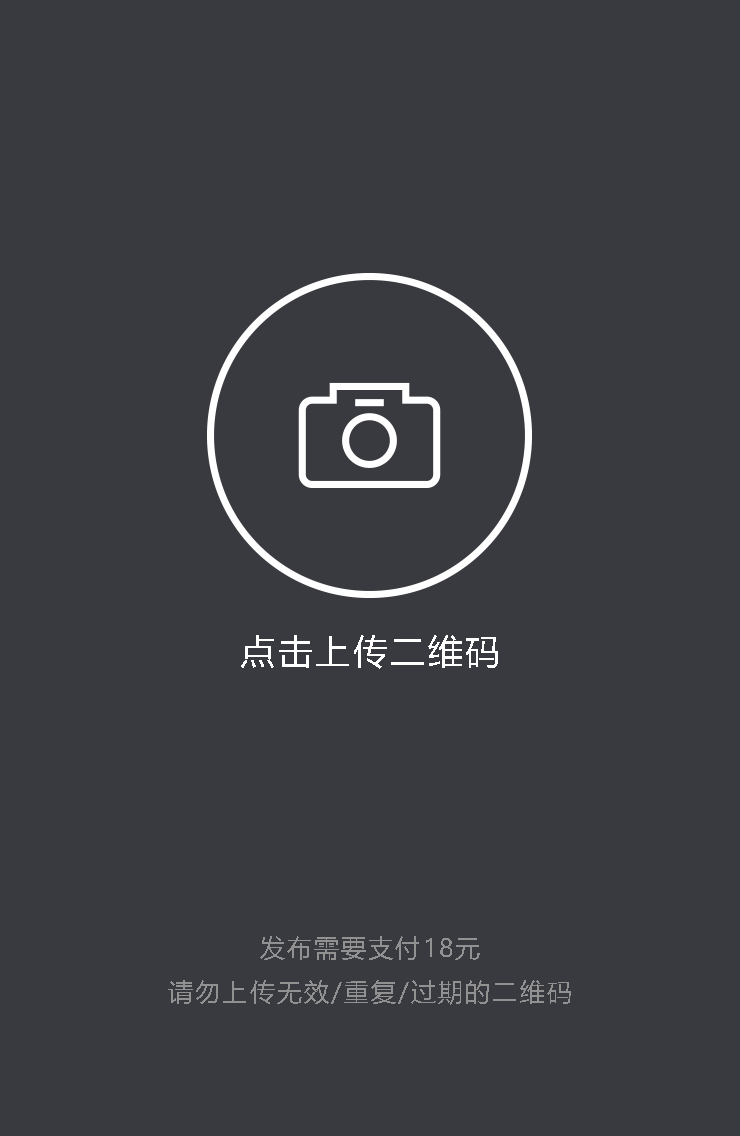
<style>
.page{position:relative;width:740px;height:1136px;background:#393a3f}
.page>*{position:absolute;margin:0}
.t1{font:35px "MicrosoftYaHei";letter-spacing:0.08em;color:#ffffff}
.t2{font:25px/44.9px "MicrosoftYaHei";letter-spacing:0.08em;color:#919191}
</style>
<div class="page">
<p class="t1" style="left:241px;top:635px;width:257px;height:34px">点击上传二维码</p>
<p class="t2" style="left:168px;top:936px;width:403px;height:69px;text-align:center">发布需要支付18元<br>请勿上传无效/重复/过期的二维码</p>
</div>
